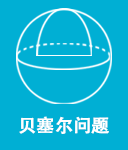
<style>
.page{position:relative;width:128px;height:150px;background:#00afd4}
.page>*{position:absolute;margin:0}
.t1{font:18px "AdobeHeitiStd-Regular";letter-spacing:-0.005em;color:#ffffff;font-weight:bold}
</style>
<div class="page">
<p class="t1" style="left:19px;top:116px;width:90px;height:18px">贝塞尔问题</p>
</div>
